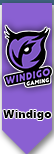
<style>
.page{position:relative;width:54px;height:154px;background:#8a60d2}
.page>*{position:absolute;margin:0}
.t1{font:11.2px "Arial-Black";letter-spacing:-0.01em;color:#000000}
</style>
<div class="page">
<p class="t1" style="left:3px;top:110px;width:49px;height:10px">Windigo</p>
</div>
